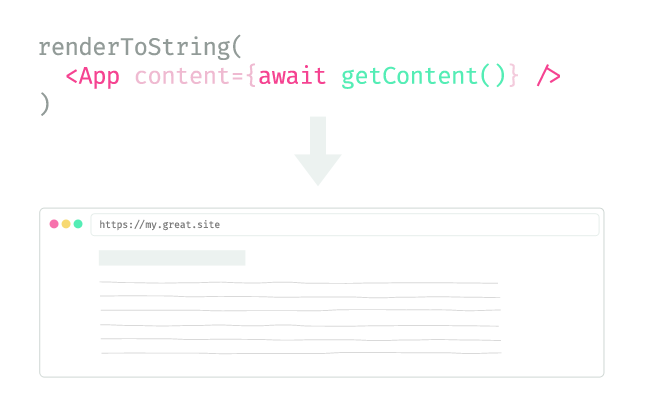
<style>
.page{position:relative;width:650px;height:400px;background:#ffffff}
.page>*{position:absolute;margin:0}
.t1{font:24px "FiraCode-Regular";letter-spacing:-0.025em;color:#929b98}
.t2{font:24px "FiraCode-Regular";letter-spacing:-0.025em;color:#f54391}
.t3{font:24px "FiraCode-Regular";letter-spacing:-0.025em;color:#efbad1}
.t4{font:24px "FiraCode-Regular";letter-spacing:-0.025em;color:#54edb5}
.t5{font:24px "FiraCode-Regular";letter-spacing:-0.025em;color:#f3cbdc}
.t6{font:10px "FiraCode-Regular";letter-spacing:-0.025em;color:#7b7b7b}
</style>
<div class="page">
<p class="t1" style="left:39px;top:34px;width:521px;height:82px">renderToString(<br>  <span class="t2">&lt;App </span><span class="t3">content={</span><span class="t2">await </span><span class="t4">getContent()</span><span class="t5">}</span><span class="t2"> /&gt;<br></span>)</p>
<p class="t6" style="left:100px;top:219px;width:120px;height:12px">https://my.great.site</p>
</div>
